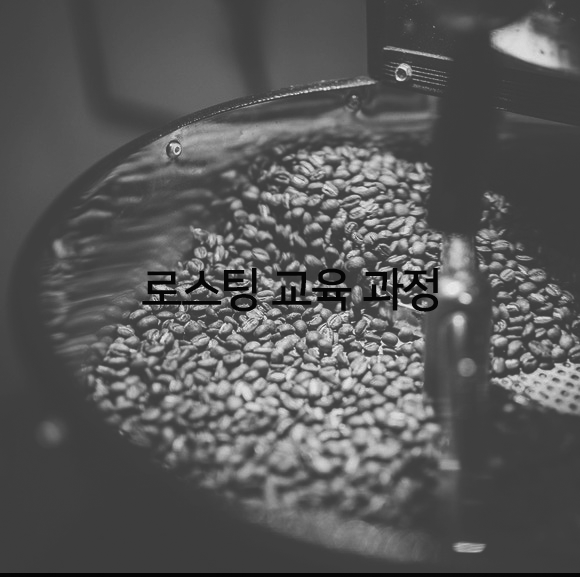
<style>
.page{position:relative;width:580px;height:577px}
.page>*{position:absolute;margin:0}
.t1{font:46px "NanumSquare_acB";color:#060606}
</style>
<div class="page">
<p class="t1" style="left:142px;top:268px;width:296px;height:44px">로스팅 교육 과정</p>
</div>
